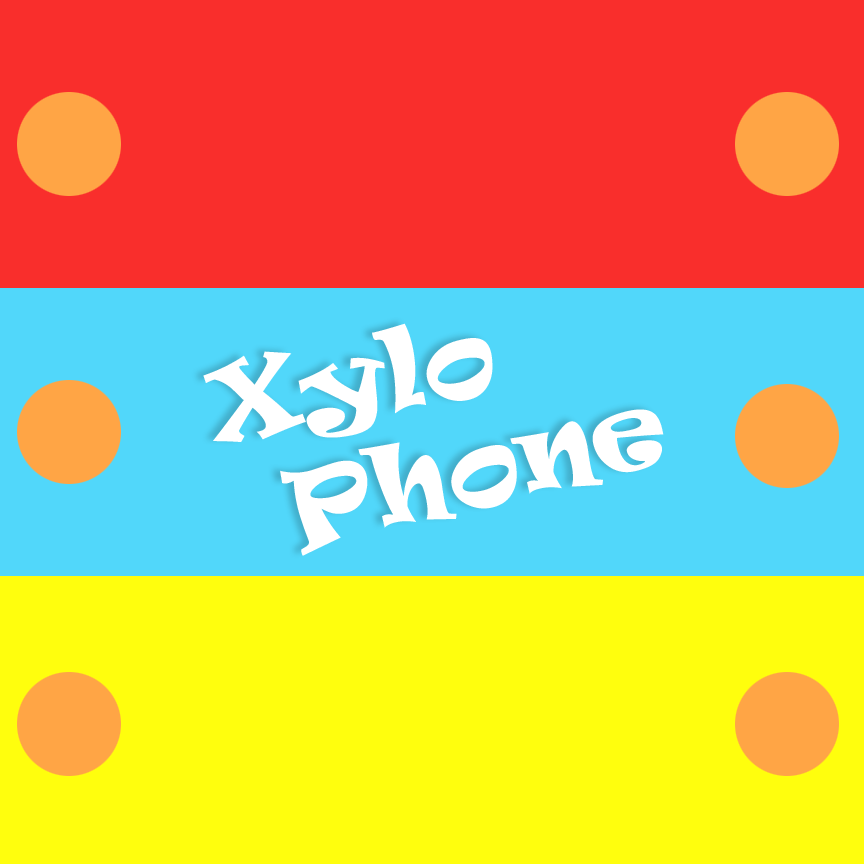
<style>
.page{position:relative;width:864px;height:864px;background:#fffe0d}
.page>*{position:absolute;margin:0}
.t1{font:100.5px "Ravie";color:#ffffff}
</style>
<div class="page">
<p class="t1" style="left:203px;top:323px;width:290px;height:119px;rotate:-11deg">Xylo</p>
<p class="t1" style="left:280px;top:409px;width:384px;height:147px;rotate:-14deg">Phone</p>
</div>
